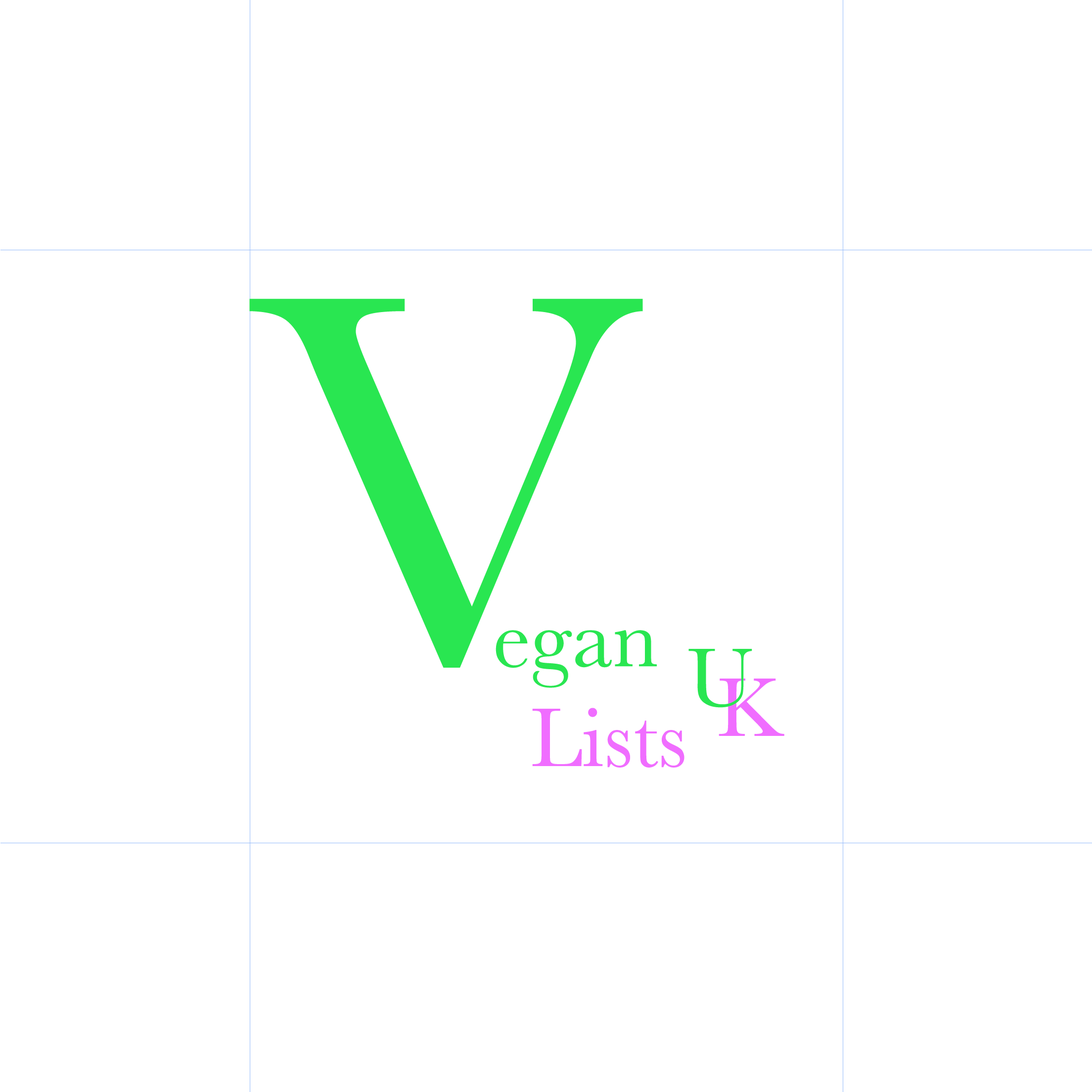
<style>
.page{position:relative;width:1092px;height:1092px;background:#ffffff}
.page>*{position:absolute;margin:0}
.t1{font:544px "Baskerville";color:#29e651}
.t2{font:86.5px "Baskerville";color:#29e651}
.t3{font:86.5px "Baskerville";color:#f06dff}
</style>
<div class="page">
<p class="t1" style="left:249px;top:299px;width:394px;height:369px">V</p>
<p class="t2" style="left:496px;top:630px;width:161px;height:58px">egan</p>
<p class="t2" style="left:688px;top:649px;width:64px;height:59px">U</p>
<p class="t3" style="left:719px;top:679px;width:65px;height:57px">K</p>
<p class="t3" style="left:532px;top:708px;width:152px;height:60px">Lists</p>
</div>
